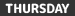
<style>
.page{position:relative;width:75px;height:16px;background:#333333}
.page>*{position:absolute;margin:0}
.t1{font:12.5px "RoundedMplus1c-ExtraBold";color:#ffffff}
</style>
<div class="page">
<p class="t1" style="left:5px;top:3px;width:65px;height:11px">THURSDAY</p>
</div>
